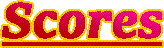
<style>
.page{position:relative;width:164px;height:48px;background:#ffffff}
.page>*{position:absolute;margin:0}
.t1{font:52.9px "SitkaText-BoldItalic";font-weight:bold;scale:0.93 1}
</style>
<div class="page">
<p class="t1" style="left:2px;top:2px;width:160px;height:37px">Scores</p>
</div>
